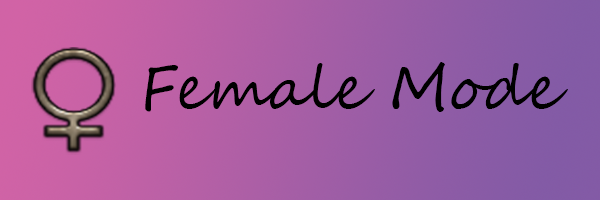
<style>
.page{position:relative;width:600px;height:200px}
.page>*{position:absolute;margin:0}
.t1{font:60px "SegoeScript";color:#000000}
</style>
<div class="page">
<p class="t1" style="left:145px;top:62px;width:423px;height:50px">Female Mode</p>
</div>
